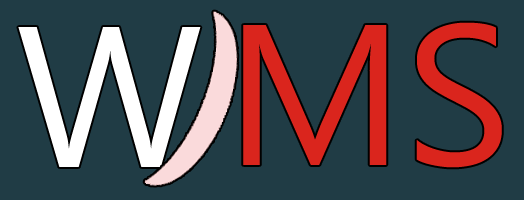
<style>
.page{position:relative;width:524px;height:200px;background:#203c45}
.page>*{position:absolute;margin:0}
.t1{font:200px "Gadugi";color:#ffffff}
.t2{font:200px "Gadugi";color:#da251d}
</style>
<div class="page">
<p class="t1" style="left:18px;top:27px;width:183px;height:140px">W</p>
<p class="t2" style="left:243px;top:22px;width:259px;height:146px">MS</p>
</div>
